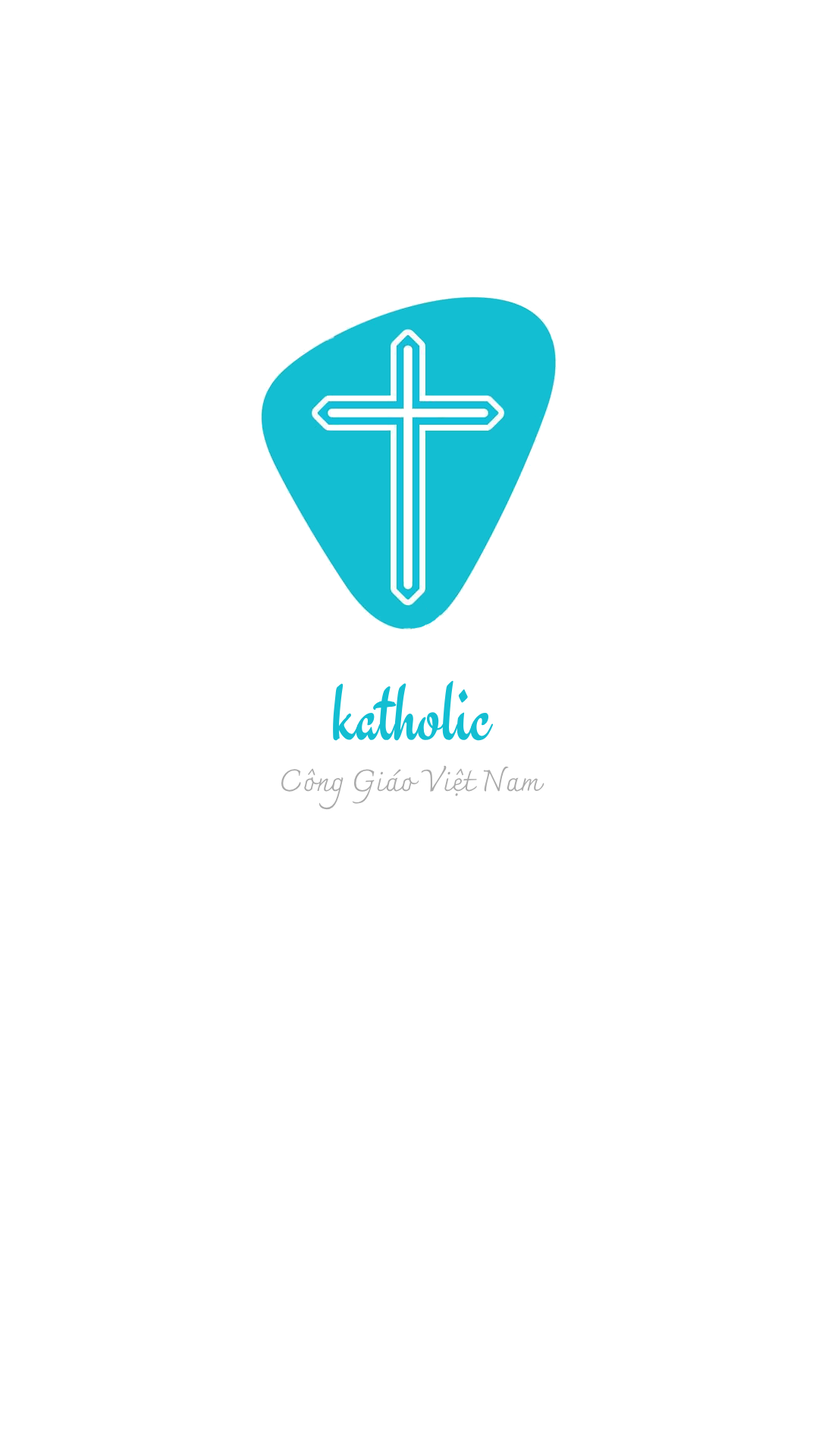
<style>
.page{position:relative;width:819px;height:1456px;background:#ffffff}
.page>*{position:absolute;margin:0}
.t1{font:84.2px "Engagement-Regular";color:#13bed2}
.t2{font:30.3px "Charmonman-Regular";color:#aaaaaa}
</style>
<div class="page">
<p class="t1" style="left:333px;top:680px;width:161px;height:61px">katholic</p>
<p class="t2" style="left:281px;top:765px;width:263px;height:45px">Công Giáo Việt Nam</p>
</div>
